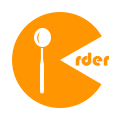
<style>
.page{position:relative;width:120px;height:120px;background:#ffffff}
.page>*{position:absolute;margin:0}
.t1{font:19.6px "STHupo";color:#ff9500}
</style>
<div class="page">
<p class="t1" style="left:75px;top:52px;width:34px;height:14px">rder</p>
</div>
